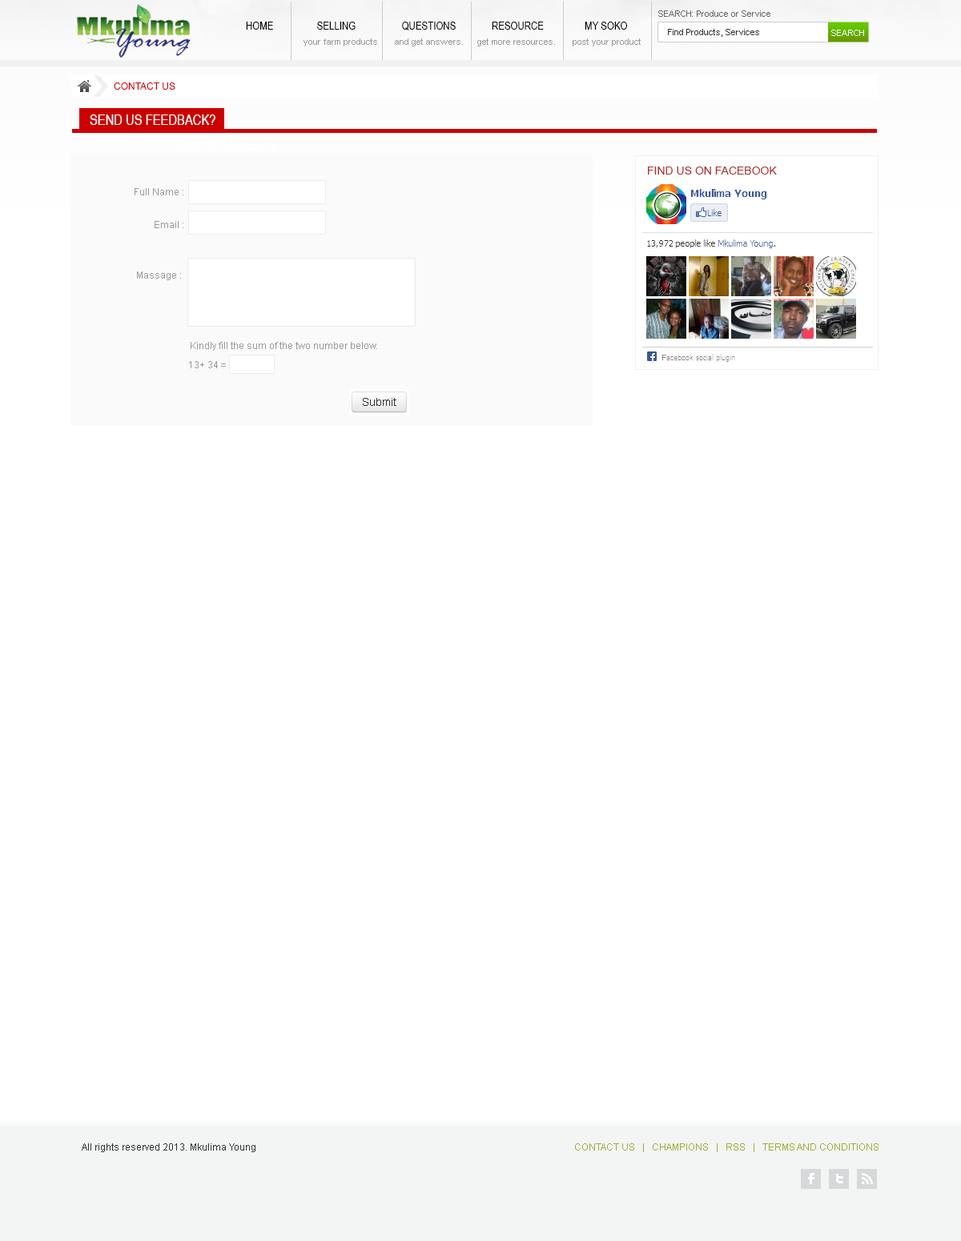
<style>
.page{position:relative;width:961px;height:1241px;background:#ffffff}
.page>*{position:absolute;margin:0}
.t1{font:8.8px "ArialMT";color:#666666}
.t2{font:11.2px "ArialNarrow";color:#000000}
.t3{font:8.8px "ArialMT";color:#333333}
.t4{font:8.8px "ArialMT";color:#ffffff}
.t5{font:8.8px "ArialMT";color:#999999}
.t6{font:9.6px "ArialMT";color:#cc0000}
.t7{font:14.4px "ArialNarrow";color:#ffffff}
.t8{font:11.2px "ArialMT";color:#ad3333}
.t9{font:9.6px "ArialMT";color:#999999}
.t10{font:9.6px "ArialMT";color:#333333}
.t11{font:9.6px "ArialMT";color:#9eab39}
</style>
<div class="page">
<p class="t1" style="left:658px;top:10px;width:112px;height:7px">SEARCH: Produce or Service</p>
<p class="t2" style="left:246px;top:22px;width:381px;height:8px">HOME                 SELLING                  QUESTIONS              RESOURCE                MY SOKO</p>
<p class="t3" style="left:668px;top:29px;width:91px;height:8px">Find Products, Services</p>
<p class="t4" style="left:831px;top:30px;width:33px;height:6px">SEARCH</p>
<p class="t5" style="left:303px;top:38px;width:74px;height:8px">your farm products</p>
<p class="t5" style="left:395px;top:38px;width:68px;height:8px">and get answers.</p>
<p class="t5" style="left:477px;top:38px;width:78px;height:8px">get more resources.</p>
<p class="t5" style="left:572px;top:38px;width:69px;height:8px">post your product</p>
<p class="t6" style="left:114px;top:82px;width:61px;height:8px">CONTACT US</p>
<p class="t7" style="left:90px;top:114px;width:125px;height:11px">SEND US FEEDBACK?</p>
<p class="t8" style="left:648px;top:167px;width:129px;height:8px">FIND US ON FACEBOOK</p>
<p class="t9" style="left:135px;top:188px;width:48px;height:7px">Full Name :</p>
<p class="t9" style="left:155px;top:221px;width:28px;height:7px">Email :</p>
<p class="t9" style="left:137px;top:271px;width:44px;height:9px">Massage :</p>
<p class="t9" style="left:191px;top:342px;width:186px;height:9px">Kindly fill the sum of the two number below.</p>
<p class="t9" style="left:189px;top:361px;width:37px;height:7px">13+ 34 =</p>
<p class="t10" style="left:82px;top:1143px;width:173px;height:9px">All rights reserved 2013. Mkulima Young</p>
<p class="t11" style="left:575px;top:1143px;width:303px;height:9px">CONTACT US   |   CHAMPIONS   |   RSS   |   TERMS AND CONDITIONS</p>
</div>
